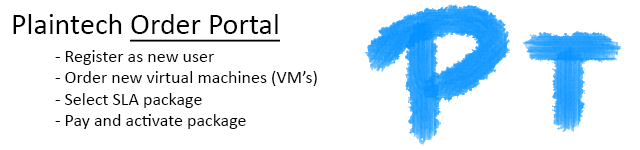
<style>
.page{position:relative;width:640px;height:150px;background:#ffffff}
.page>*{position:absolute;margin:0}
.t1{font:30px "Calibri";color:#000000;text-decoration:underline}
.t2{font:30px "Calibri";color:#000000}
.t3{font:18px "Calibri";color:#000000}
</style>
<div class="page">
<p class="t1" style="left:13px;top:14px;width:267px;height:28px"><span class="t2">Plaintech </span>Order Portal</p>
<p class="t3" style="left:55px;top:50px;width:262px;height:79px">- Register as new user<br> - Order new virtual machines (VM’s)<br> - Select SLA package<br> - Pay and activate package</p>
</div>
